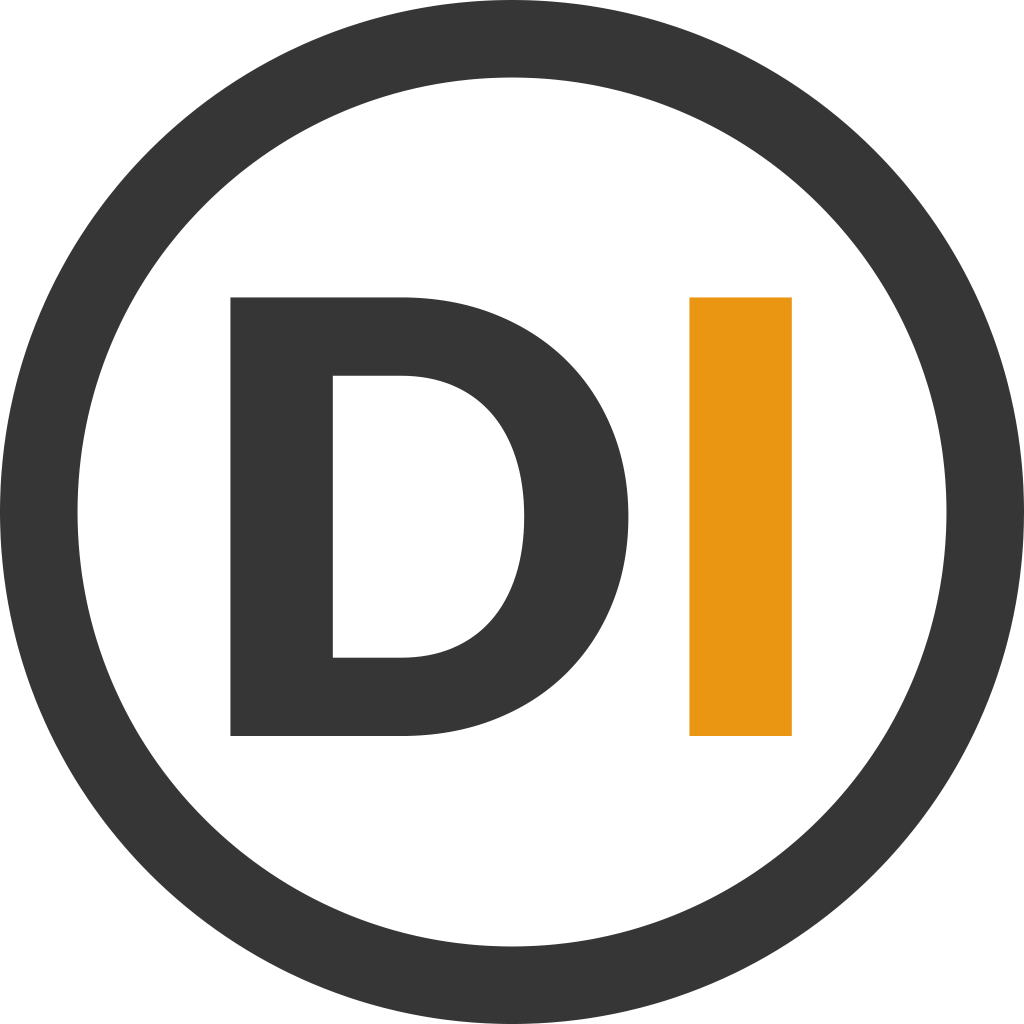
<style>
.page{position:relative;width:1024px;height:1024px;background:#ffffff}
.page>*{position:absolute;margin:0}
.t1{font:602.5px "Lato-Black";color:#363636}
.t2{font:602.5px "Lato-Black";color:#ea9612}
</style>
<div class="page">
<p class="t1" style="left:230px;top:297px;width:562px;height:439px">D<span class="t2">I</span></p>
</div>
